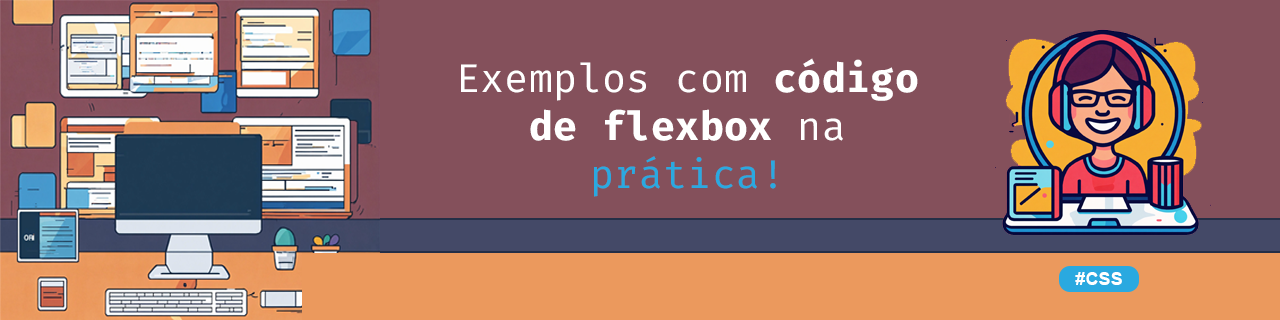
<style>
.page{position:relative;width:1280px;height:320px;background:#84505b}
.page>*{position:absolute;margin:0}
.t1{font:40px "FiraCode-Bold";letter-spacing:0.01em;color:#ffffff}
.t2{font:40px "FiraCode-Regular";letter-spacing:0.01em;color:#ffffff}
.t3{font:40px "FiraCode-Regular";letter-spacing:0.01em;color:#2aa9e0}
</style>
<div class="page">
<p class="t1" style="left:461px;top:58px;width:457px;height:139px;text-align:center"><span class="t2">Exemplos com </span>código de flexbox<span class="t2"> na </span><span class="t3">prática!</span></p>
</div>
